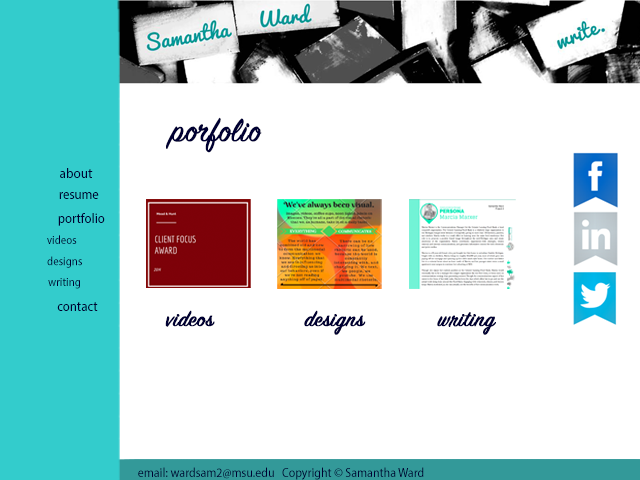
<style>
.page{position:relative;width:640px;height:480px;background:#ffffff}
.page>*{position:absolute;margin:0}
.t1{font:36px "SignPainter-HouseScript";color:#000033;font-weight:bold}
.t2{font:14px "MyriadPro-SemiCn";color:#000033;scale:1.03 1}
.t3{font:14px "MyriadPro-SemiCn";color:#000033}
.t4{font:12px "MyriadPro-SemiCn";color:#000033}
.t5{font:24px "SignPainter-HouseScript";color:#000033;font-weight:bold}
.t6{font:13px "MyriadPro-SemiCn";color:#000033}
</style>
<div class="page">
<p class="t1" style="left:166px;top:117px;width:96px;height:36px">porfolio</p>
<p class="t2" style="left:60px;top:168px;width:33px;height:10px">about</p>
<p class="t3" style="left:59px;top:192px;width:40px;height:7px">resume</p>
<p class="t3" style="left:58px;top:213px;width:47px;height:13px">portfolio</p>
<p class="t4" style="left:47px;top:235px;width:30px;height:9px">videos</p>
<p class="t4" style="left:47px;top:256px;width:35px;height:12px">designs</p>
<p class="t4" style="left:48px;top:278px;width:32px;height:11px">writing</p>
<p class="t3" style="left:57px;top:302px;width:41px;height:9px">contact</p>
<p class="t5" style="left:165px;top:310px;width:50px;height:17px">videos</p>
<p class="t5" style="left:304px;top:310px;width:62px;height:25px">designs</p>
<p class="t5" style="left:437px;top:312px;width:59px;height:23px">writing</p>
<p class="t6" style="left:138px;top:467px;width:286px;height:13px">email: wardsam2@msu.edu   Copyright © Samantha Ward</p>
</div>
